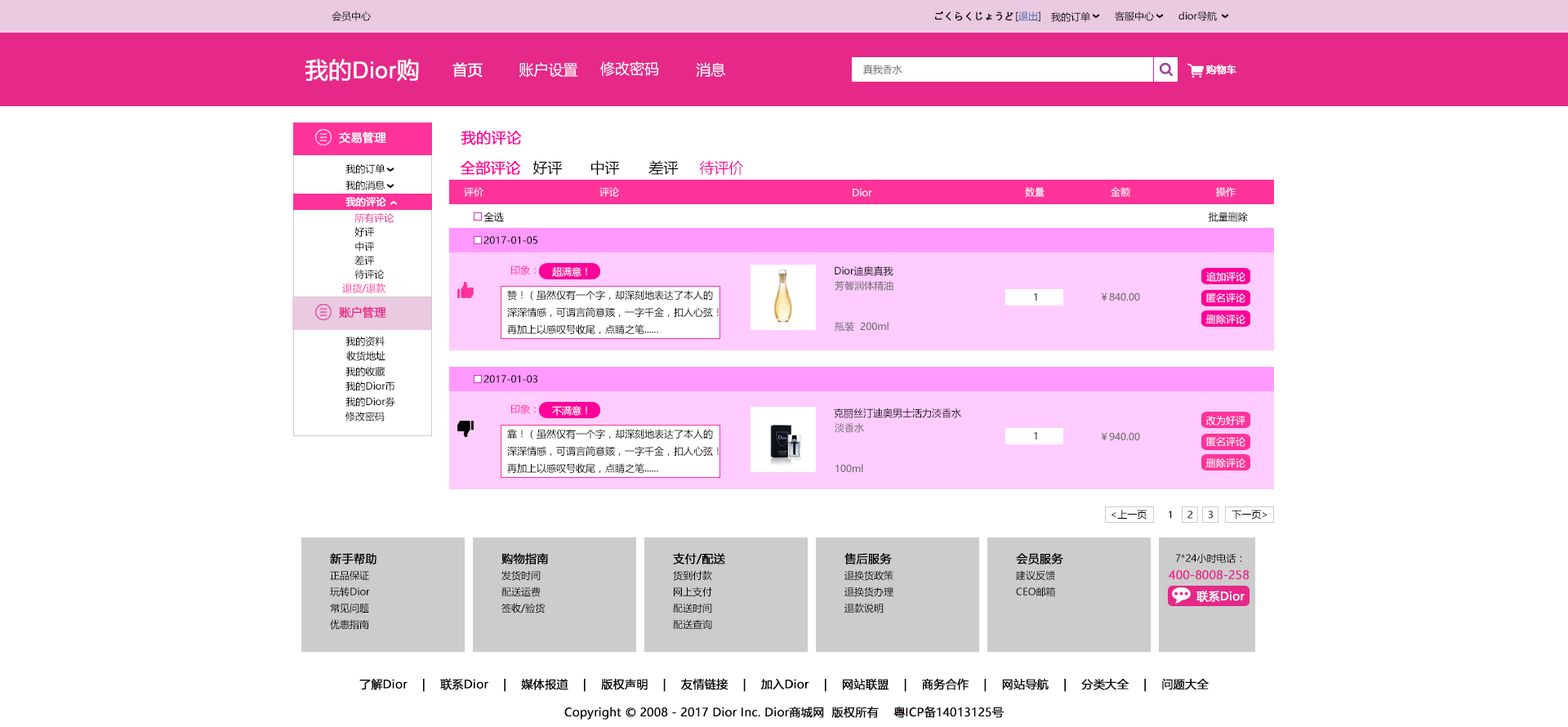
<style>
.page{position:relative;width:1568px;height:727px;background:#ffffff}
.page>*{position:absolute;margin:0}
.t1{font:9.8px "MicrosoftYaHei";color:#040000}
.t2{font:9.8px "MicrosoftYaHei";color:#040000;font-weight:bold}
.t3{font:9.8px "MicrosoftYaHei";color:#2a62ae}
.t4{font:22.9px "ArialMT";color:#ffffff;font-weight:bold}
.t5{font:22.9px "MicrosoftYaHei";color:#ffffff;font-weight:bold}
.t6{font:14.7px "MicrosoftYaHei";color:#ffffff;font-weight:bold}
.t7{font:14.7px "MicrosoftYaHei";color:#ffffff}
.t8{font:9.8px "MicrosoftYaHei";color:#666666}
.t9{font:9.8px "MicrosoftYaHei";color:#ffffff;font-weight:bold}
.t10{font:11.4px "MicrosoftYaHei";color:#ffffff;font-weight:bold}
.t11{font:14.7px "MicrosoftYaHei";color:#ff0099;font-weight:bold}
.t12{font:14.7px "MicrosoftYaHei";color:#000000}
.t13{font:14.7px "MicrosoftYaHei";color:#ff0099}
.t14{font:9.8px "MicrosoftYaHei";color:#000000}
.t15{font:9.8px "MicrosoftYaHei";color:#ffffff}
.t16{font:9.8px "MicrosoftYaHei";color:#e62889}
.t17{font:9.8px "MicrosoftYaHei";color:#ff3399}
.t18{font:9.8px "MicrosoftYaHei"}
.t19{font:11.4px "MicrosoftYaHei";color:#e62889;font-weight:bold}
.t20{font:11.4px "MicrosoftYaHei";color:#040000;font-weight:bold}
.t21{font:11.4px "MicrosoftYaHei";color:#000000;font-weight:bold}
</style>
<div class="page">
<p class="t1" style="left:332px;top:11px;width:39px;height:10px">会员中心</p>
<p class="t2" style="left:935px;top:11px;width:78px;height:10px">ごくらくじょうど</p>
<p class="t3" style="left:1016px;top:11px;width:24px;height:10px"><span class="t1">[</span>退出<span class="t1">]</span></p>
<p class="t1" style="left:1051px;top:11px;width:39px;height:11px">我的订单</p>
<p class="t1" style="left:1115px;top:11px;width:39px;height:10px">客服中心</p>
<p class="t1" style="left:1178px;top:11px;width:39px;height:10px">dior导航</p>
<p class="t4" style="left:305px;top:59px;width:114px;height:23px"><span class="t5">我的</span>Dior<span class="t5">购</span></p>
<p class="t6" style="left:452px;top:62px;width:31px;height:16px">首页</p>
<p class="t7" style="left:519px;top:62px;width:59px;height:16px">账户设置</p>
<p class="t7" style="left:600px;top:61px;width:59px;height:15px">修改密码</p>
<p class="t7" style="left:696px;top:62px;width:30px;height:15px">消息</p>
<p class="t8" style="left:863px;top:65px;width:39px;height:9px">真我香水</p>
<p class="t9" style="left:1205px;top:65px;width:31px;height:10px">购物车</p>
<p class="t10" style="left:339px;top:131px;width:47px;height:13px">交易管理</p>
<p class="t11" style="left:461px;top:130px;width:61px;height:15px">我的评论</p>
<p class="t11" style="left:460px;top:160px;width:61px;height:16px">全部评论</p>
<p class="t12" style="left:532px;top:160px;width:31px;height:15px">好评</p>
<p class="t12" style="left:591px;top:160px;width:29px;height:16px">中评</p>
<p class="t12" style="left:648px;top:160px;width:31px;height:15px">差评</p>
<p class="t13" style="left:699px;top:160px;width:45px;height:16px">待评价</p>
<p class="t14" style="left:345px;top:163px;width:40px;height:11px">我的订单</p>
<p class="t14" style="left:345px;top:180px;width:40px;height:10px">我的消息</p>
<p class="t9" style="left:345px;top:197px;width:41px;height:10px">我的评论</p>
<p class="t15" style="left:464px;top:187px;width:19px;height:10px">评价</p>
<p class="t15" style="left:599px;top:187px;width:20px;height:10px">评论</p>
<p class="t15" style="left:853px;top:188px;width:19px;height:9px">Dior</p>
<p class="t15" style="left:1025px;top:187px;width:20px;height:10px">数量</p>
<p class="t15" style="left:1111px;top:187px;width:19px;height:10px">金额</p>
<p class="t15" style="left:1216px;top:187px;width:20px;height:10px">操作</p>
<p class="t16" style="left:354px;top:213px;width:40px;height:10px">所有评论</p>
<p class="t14" style="left:483px;top:212px;width:21px;height:9px">全选</p>
<p class="t14" style="left:1208px;top:212px;width:40px;height:10px">批量删除</p>
<p class="t1" style="left:354px;top:227px;width:20px;height:10px">好评</p>
<p class="t1" style="left:355px;top:242px;width:19px;height:10px">中评</p>
<p class="t14" style="left:483px;top:236px;width:54px;height:8px">2017-01-05</p>
<p class="t1" style="left:354px;top:255px;width:20px;height:10px">差评</p>
<p class="t1" style="left:354px;top:270px;width:31px;height:9px">待评论</p>
<p class="t17" style="left:510px;top:265px;width:26px;height:10px">印象：</p>
<p class="t15" style="left:552px;top:267px;width:35px;height:10px">超满意！</p>
<p class="t14" style="left:835px;top:266px;width:58px;height:10px">Dior迪奥真我</p>
<p class="t8" style="left:835px;top:281px;width:58px;height:10px">芳馨润体精油</p>
<p class="t15" style="left:1206px;top:271px;width:39px;height:11px">追加评论</p>
<p class="t17" style="left:342px;top:283px;width:43px;height:10px">退货/退款</p>
<p class="t14" style="left:507px;top:290px;width:212px;height:45px">赞！（虽然仅有一个字，却深刻地表达了本人的<br>深深情感，可谓言简意赅，一字千金，扣人心弦！再加上以感叹号收尾，点睛之笔......</p>
<p class="t18" style="left:1034px;top:292px;width:3px;height:9px">1</p>
<p class="t8" style="left:1101px;top:292px;width:39px;height:9px">￥840.00</p>
<p class="t15" style="left:1206px;top:293px;width:39px;height:10px">匿名评论</p>
<p class="t19" style="left:339px;top:306px;width:47px;height:12px">账户管理</p>
<p class="t15" style="left:1206px;top:314px;width:39px;height:10px">删除评论</p>
<p class="t8" style="left:835px;top:322px;width:54px;height:10px">瓶装  200ml</p>
<p class="t1" style="left:345px;top:336px;width:40px;height:10px">我的资料</p>
<p class="t1" style="left:346px;top:351px;width:39px;height:10px">收货地址</p>
<p class="t1" style="left:345px;top:367px;width:40px;height:9px">我的收藏</p>
<p class="t14" style="left:483px;top:375px;width:54px;height:8px">2017-01-03</p>
<p class="t1" style="left:345px;top:381px;width:49px;height:10px">我的Dior币</p>
<p class="t1" style="left:345px;top:397px;width:50px;height:10px">我的Dior券</p>
<p class="t1" style="left:345px;top:412px;width:40px;height:9px">修改密码</p>
<p class="t17" style="left:510px;top:404px;width:26px;height:10px">印象：</p>
<p class="t15" style="left:552px;top:406px;width:35px;height:10px">不满意！</p>
<p class="t14" style="left:834px;top:408px;width:127px;height:10px">克丽丝汀迪奥男士活力淡香水</p>
<p class="t8" style="left:835px;top:423px;width:29px;height:10px">淡香水</p>
<p class="t15" style="left:1206px;top:416px;width:39px;height:9px">改为好评</p>
<p class="t14" style="left:507px;top:429px;width:212px;height:45px">靠！（虽然仅有一个字，却深刻地表达了本人的<br>深深情感，可谓言简意赅，一字千金，扣人心弦！再加上以感叹号收尾，点睛之笔......</p>
<p class="t18" style="left:1034px;top:431px;width:3px;height:8px">1</p>
<p class="t8" style="left:1101px;top:432px;width:39px;height:8px">￥940.00</p>
<p class="t15" style="left:1206px;top:437px;width:39px;height:10px">匿名评论</p>
<p class="t15" style="left:1206px;top:458px;width:39px;height:10px">删除评论</p>
<p class="t8" style="left:835px;top:464px;width:28px;height:8px">100ml</p>
<p class="t14" style="left:1111px;top:510px;width:36px;height:9px">&lt;上一页</p>
<p class="t14" style="left:1232px;top:510px;width:35px;height:9px">下一页&gt;</p>
<p class="t14" style="left:1169px;top:510px;width:3px;height:9px">1</p>
<p class="t14" style="left:1187px;top:510px;width:6px;height:9px">2</p>
<p class="t14" style="left:1208px;top:510px;width:5px;height:9px">3</p>
<p class="t20" style="left:330px;top:553px;width:46px;height:11px">新手帮助</p>
<p class="t20" style="left:501px;top:553px;width:48px;height:11px">购物指南</p>
<p class="t20" style="left:673px;top:553px;width:52px;height:11px">支付/配送</p>
<p class="t20" style="left:844px;top:553px;width:48px;height:11px">售后服务</p>
<p class="t20" style="left:1016px;top:553px;width:47px;height:11px">会员服务</p>
<p class="t1" style="left:1175px;top:553px;width:67px;height:11px">7*24小时电话：</p>
<p class="t1" style="left:330px;top:571px;width:39px;height:10px">正品保证</p>
<p class="t1" style="left:501px;top:570px;width:40px;height:11px">发货时间</p>
<p class="t1" style="left:673px;top:570px;width:39px;height:11px">货到付款</p>
<p class="t1" style="left:844px;top:570px;width:49px;height:11px">退换货政策</p>
<p class="t1" style="left:1016px;top:570px;width:39px;height:11px">建议反馈</p>
<p class="t19" style="left:1169px;top:570px;width:81px;height:10px">400-8008-258</p>
<p class="t1" style="left:330px;top:586px;width:40px;height:11px">玩转Dior</p>
<p class="t1" style="left:501px;top:586px;width:40px;height:11px">配送运费</p>
<p class="t1" style="left:674px;top:586px;width:38px;height:11px">网上支付</p>
<p class="t1" style="left:844px;top:586px;width:49px;height:11px">退换货办理</p>
<p class="t1" style="left:1016px;top:586px;width:40px;height:11px">CEO邮箱</p>
<p class="t10" style="left:1196px;top:590px;width:49px;height:12px">联系Dior</p>
<p class="t1" style="left:330px;top:603px;width:39px;height:10px">常见问题</p>
<p class="t1" style="left:501px;top:603px;width:44px;height:10px">签收/验货</p>
<p class="t1" style="left:673px;top:603px;width:39px;height:10px">配送时间</p>
<p class="t1" style="left:844px;top:603px;width:40px;height:10px">退款说明</p>
<p class="t1" style="left:330px;top:619px;width:39px;height:11px">优惠指南</p>
<p class="t1" style="left:673px;top:619px;width:39px;height:10px">配送查询</p>
<p class="t20" style="left:359px;top:678px;width:850px;height:14px">了解Dior    |    联系Dior    |    媒体报道    |    版权声明    |    友情链接    |    加入Dior    |    网站联盟    |    商务合作    |    网站导航    |    分类大全    |    问题大全</p>
<p class="t21" style="left:564px;top:706px;width:440px;height:13px">Copyright © 2008 - 2017 Dior Inc. Dior商城网  版权所有    粤ICP备14013125号</p>
</div>
